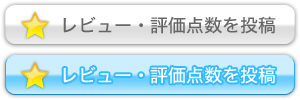
<style>
.page{position:relative;width:300px;height:100px;background:#ffffff}
.page>*{position:absolute;margin:0}
.t1{font:18px "HiraginoKaku-W5-90msp-RKSJ-H";color:#666666}
.t2{font:18px "HiraginoKaku-W5-90msp-RKSJ-H";color:#ffffff}
</style>
<div class="page">
<p class="t1" style="left:63px;top:16px;width:213px;height:18px">レビュー・評価点数を投稿</p>
<p class="t2" style="left:63px;top:66px;width:213px;height:18px">レビュー・評価点数を投稿</p>
</div>
